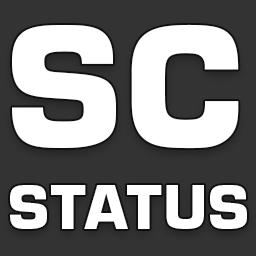
<style>
.page{position:relative;width:256px;height:256px;background:#333333}
.page>*{position:absolute;margin:0}
.t1{font:161.7px "EurostileLTStd-Bold";letter-spacing:0.025em;color:#ffffff}
.t2{font:57.7px "EurostileLTStd-Bold";letter-spacing:0.025em;color:#ffffff}
</style>
<div class="page">
<p class="t1" style="left:12px;top:24px;width:227px;height:125px">SC</p>
<p class="t2" style="left:10px;top:185px;width:237px;height:44px">STATUS</p>
</div>
